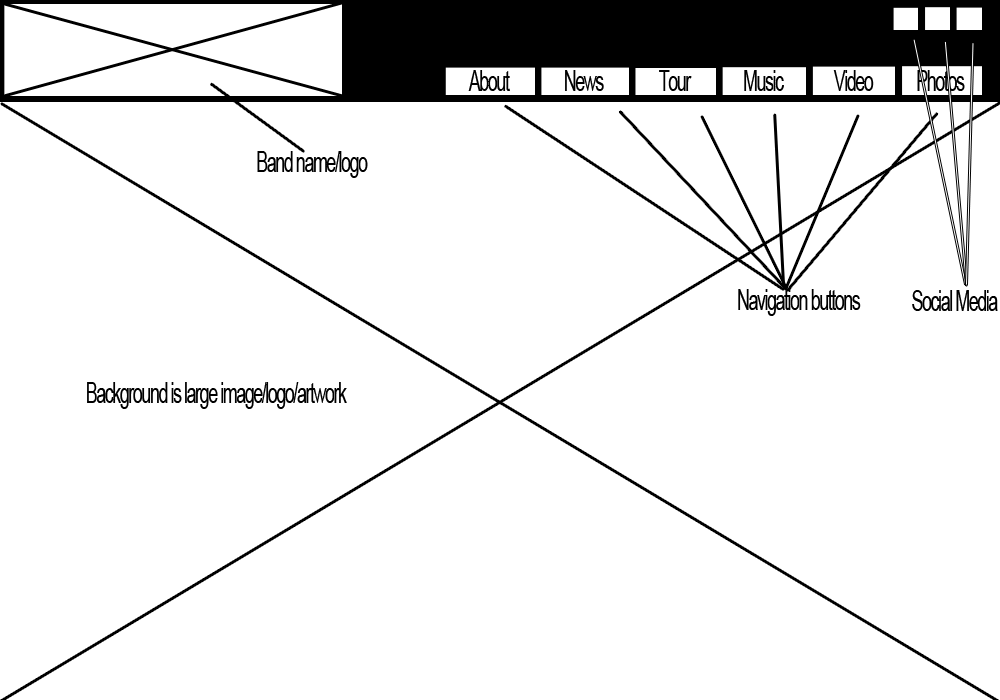
<style>
.page{position:relative;width:1000px;height:700px;background:#ffffff}
.page>*{position:absolute;margin:0}
.t1{font:28.9px "ArialMT";letter-spacing:-0.08em;color:#000000;scale:0.62 1}
</style>
<div class="page">
<p class="t1" style="left:468px;top:70px;width:42px;height:21px">About</p>
<p class="t1" style="left:565px;top:70px;width:39px;height:21px">News</p>
<p class="t1" style="left:659px;top:70px;width:33px;height:21px">Tour</p>
<p class="t1" style="left:744px;top:70px;width:40px;height:21px">Music</p>
<p class="t1" style="left:833px;top:70px;width:41px;height:21px">Video</p>
<p class="t1" style="left:917px;top:70px;width:48px;height:21px">Photos</p>
<p class="t1" style="left:257px;top:151px;width:111px;height:27px">Band name/logo</p>
<p class="t1" style="left:738px;top:289px;width:123px;height:27px">Navigation buttons</p>
<p class="t1" style="left:912px;top:290px;width:86px;height:21px">Social Media</p>
<p class="t1" style="left:87px;top:382px;width:260px;height:27px">Background is large image/logo/artwork</p>
</div>
